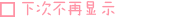
<style>
.page{position:relative;width:170px;height:17px;background:#ffffff}
.page>*{position:absolute;margin:0}
.t1{font:18px "¢è?";color:#ff93a5}
</style>
<div class="page">
<p class="t1" style="left:22px;top:1px;width:93px;height:15px">下次不再显示</p>
</div>
